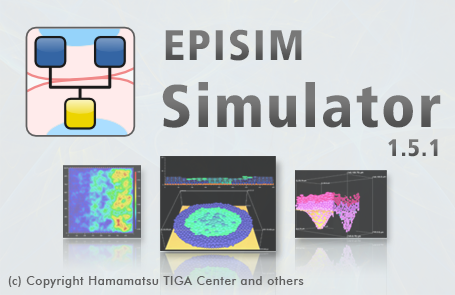
<style>
.page{position:relative;width:455px;height:295px}
.page>*{position:absolute;margin:0}
.t1{font:42.7px "Frutiger77-CondensedBlack";letter-spacing:0.05em;color:#606060;font-variant:small-caps}
.t2{font:60px "Frutiger77-CondensedBlack";letter-spacing:0.04em;color:#606060}
.t3{font:24px "Frutiger77-CondensedBlack";letter-spacing:0.04em;color:#606060}
.t4{font:12px "FuturaBT-Medium";letter-spacing:0.04em;color:#606060}
</style>
<div class="page">
<p class="t1" style="left:165px;top:29px;width:137px;height:32px">EPISIM</p>
<p class="t2" style="left:162px;top:82px;width:279px;height:46px">Simulator</p>
<p class="t3" style="left:388px;top:139px;width:50px;height:18px">1.5.1</p>
<p class="t4" style="left:8px;top:276px;width:296px;height:12px">(c) Copyright Hamamatsu TIGA Center and others</p>
</div>
